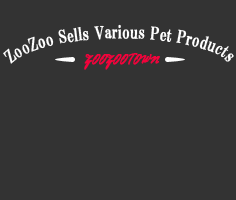
<style>
.page{position:relative;width:236px;height:200px;background:#333333}
.page>*{position:absolute;margin:0}
.t1{font:17.2px "HGPMinchoE";color:#ffffff;font-weight:bold;scale:0.81 1}
.t2{font:13.5px "HGPMinchoE";color:#1d1a1a;font-weight:bold;scale:0.81 1}
.t3{font:14.8px "RageItalic";color:#f3023b;font-weight:bold;font-style:italic;scale:0.81 1}
</style>
<div class="page">
<p class="t1" style="left:3px;top:24px;width:231px;height:40px;text-align:center"><span class="t2">                                              </span>ZooZoo Sells Various Pet Products</p>
<p class="t3" style="left:84px;top:53px;width:76px;height:17px">ZOOZOOTOWN</p>
</div>
